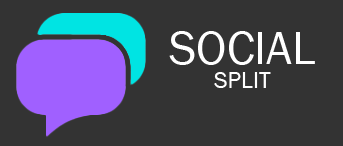
<style>
.page{position:relative;width:343px;height:146px;background:#333333}
.page>*{position:absolute;margin:0}
.t1{font:48px "FranklinGothic-Book";color:#ffffff}
.t2{font:24px "FranklinGothic-Book";color:#ffffff}
</style>
<div class="page">
<p class="t1" style="left:169px;top:31px;width:146px;height:34px">SOCIAL</p>
<p class="t2" style="left:214px;top:72px;width:57px;height:16px">SPLIT</p>
</div>
